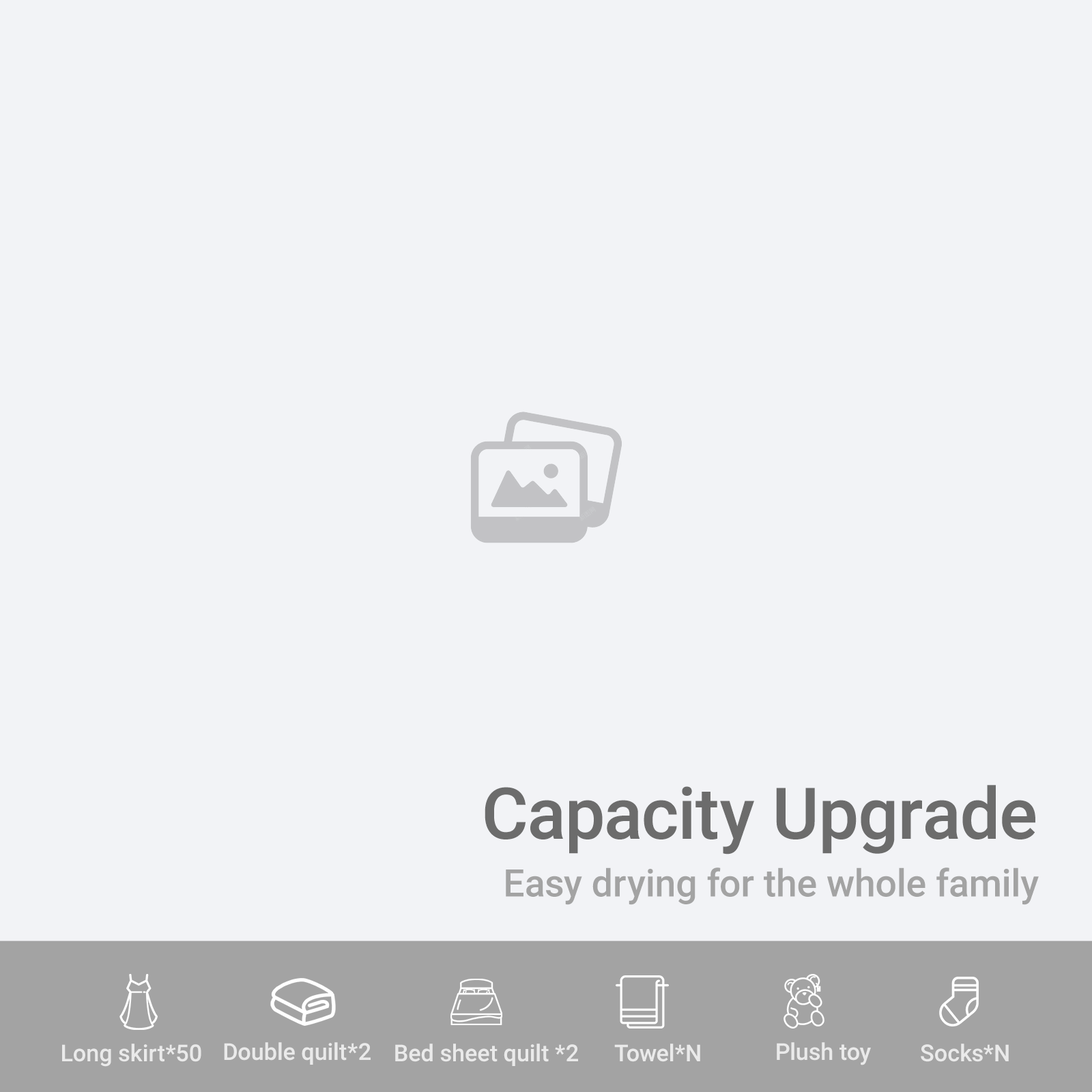
<style>
.page{position:relative;width:1092px;height:1092px;background:#f2f3f6}
.page>*{position:absolute;margin:0}
.t1{font:71.3px "Roboto-Medium";color:#6c6c6c}
.t2{font:37.9px "Roboto-Medium";color:#a3a3a3}
.t3{font:23.3px "Roboto-Medium";color:#ffffff}
</style>
<div class="page">
<p class="t1" style="left:485px;top:785px;width:550px;height:69px">Capacity Upgrade</p>
<p class="t2" style="left:506px;top:867px;width:533px;height:38px">Easy drying for the whole family</p>
<p class="t3" style="left:62px;top:1044px;width:139px;height:23px;opacity:0.75">Long skirt*50</p>
<p class="t3" style="left:224px;top:1042px;width:147px;height:23px;opacity:0.75">Double quilt*2</p>
<p class="t3" style="left:395px;top:1044px;width:183px;height:22px;opacity:0.75">Bed sheet quilt *2</p>
<p class="t3" style="left:614px;top:1044px;width:86px;height:18px;opacity:0.75">Towel*N</p>
<p class="t3" style="left:777px;top:1042px;width:94px;height:23px;opacity:0.75">Plush toy</p>
<p class="t3" style="left:921px;top:1044px;width:88px;height:18px;opacity:0.75">Socks*N</p>
</div>
